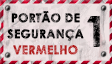
<style>
.page{position:relative;width:112px;height:64px}
.page>*{position:absolute;margin:0}
.t1{font:12px/16px "CenturyGothic-Bold";letter-spacing:0.005em;text-transform:uppercase;font-weight:bold}
.t2{font:41.3px "CenturyGothic-Bold";letter-spacing:0.005em;text-transform:uppercase;font-weight:bold}
</style>
<div class="page">
<p class="t1" style="left:7px;top:11px;width:77px;height:44px;text-align:center">PORTÃO DE<br>SEGURANÇA<br>VERMELHO</p>
<p class="t2" style="left:87px;top:16px;width:14px;height:31px">1</p>
</div>
